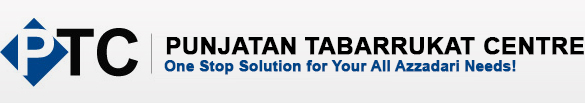
<style>
.page{position:relative;width:585px;height:103px}
.page>*{position:absolute;margin:0}
.t1{font:24px "Arial-BoldMT";color:#000000;font-weight:bold}
.t2{font:15px "Arial-BoldMT";color:#004487;font-weight:bold}
</style>
<div class="page">
<p class="t1" style="left:166px;top:37px;width:418px;height:18px">PUNJATAN TABARRUKAT CENTRE</p>
<p class="t2" style="left:164px;top:60px;width:352px;height:15px">One Stop Solution for Your All Azzadari Needs!</p>
</div>
